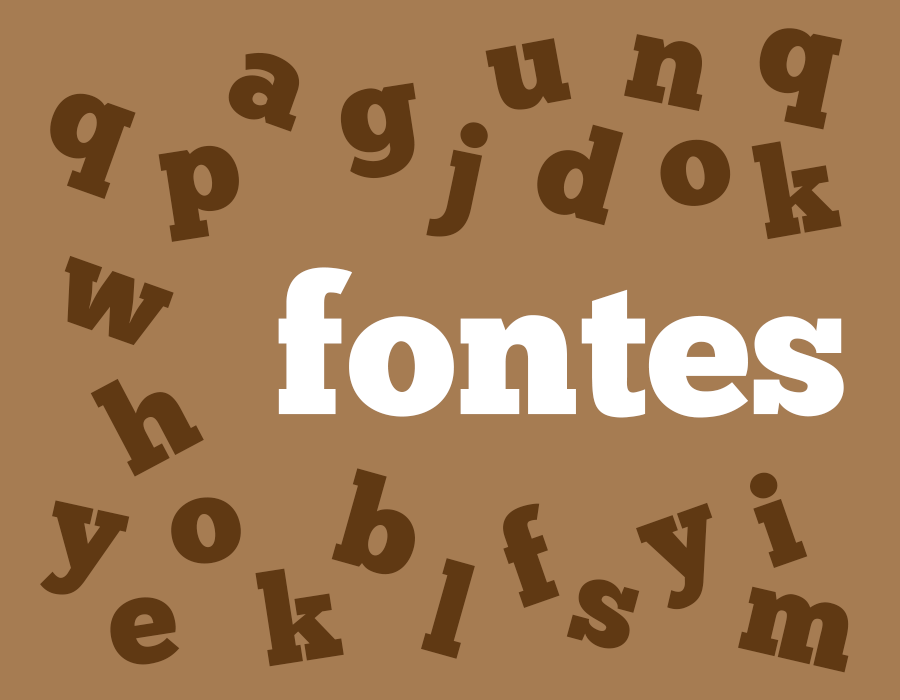
<style>
.page{position:relative;width:900px;height:700px;background:#a67c52}
.page>*{position:absolute;margin:0}
.t1{font:125.6px "ChunkFive-Roman";color:#603913}
.t2{font:125.3px "ChunkFive-Roman";color:#603913}
.t3{font:190.7px "ChunkFive-Roman";color:#ffffff}
</style>
<div class="page">
<p class="t1" style="left:759px;top:28px;width:84px;height:102px;rotate:12deg">q</p>
<p class="t1" style="left:485px;top:38px;width:87px;height:72px;rotate:-11deg">u</p>
<p class="t1" style="left:624px;top:34px;width:79px;height:78px;rotate:12deg">n</p>
<p class="t2" style="left:228px;top:52px;width:72px;height:80px;rotate:20deg">a</p>
<p class="t1" style="left:340px;top:82px;width:76px;height:97px;rotate:-9deg">g</p>
<p class="t1" style="left:50px;top:93px;width:86px;height:106px;rotate:20deg">q</p>
<p class="t1" style="left:426px;top:122px;width:62px;height:115px;rotate:12deg">j</p>
<p class="t1" style="left:537px;top:124px;width:87px;height:102px;rotate:15deg">d</p>
<p class="t1" style="left:158px;top:145px;width:81px;height:97px;rotate:-9deg">p</p>
<p class="t1" style="left:660px;top:139px;width:71px;height:67px;rotate:-10deg">o</p>
<p class="t1" style="left:751px;top:141px;width:91px;height:99px;rotate:-10deg">k</p>
<p class="t1" style="left:64px;top:255px;width:110px;height:91px;rotate:20deg">w</p>
<p class="t3" style="left:278px;top:267px;width:566px;height:151px">fontes</p>
<p class="t1" style="left:90px;top:378px;width:114px;height:99px;rotate:-28deg">h</p>
<p class="t1" style="left:331px;top:468px;width:84px;height:107px;rotate:16deg">b</p>
<p class="t1" style="left:750px;top:472px;width:58px;height:96px;rotate:-19deg">i</p>
<p class="t1" style="left:171px;top:497px;width:70px;height:67px;rotate:-9deg">o</p>
<p class="t1" style="left:40px;top:500px;width:90px;height:95px;rotate:12deg">y</p>
<p class="t1" style="left:503px;top:503px;width:57px;height:105px;rotate:-19deg">f</p>
<p class="t1" style="left:636px;top:502px;width:77px;height:108px;rotate:-20deg">y</p>
<p class="t1" style="left:421px;top:558px;width:54px;height:101px;rotate:16deg">l</p>
<p class="t1" style="left:255px;top:568px;width:89px;height:99px;rotate:-9deg">k</p>
<p class="t1" style="left:566px;top:579px;width:74px;height:70px;rotate:15deg">s</p>
<p class="t1" style="left:738px;top:586px;width:111px;height:87px;rotate:13deg">m</p>
<p class="t1" style="left:110px;top:597px;width:70px;height:68px;rotate:-9deg">e</p>
</div>
